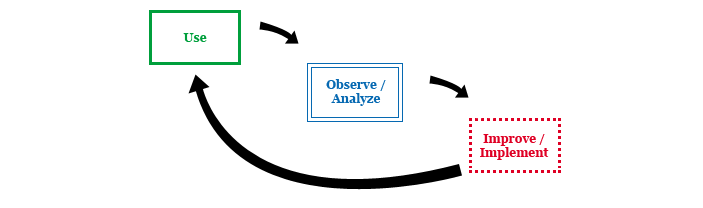
<style>
.page{position:relative;width:703px;height:208px;background:#ffffff}
.page>*{position:absolute;margin:0}
.t1{font:12px "Georgia-Bold";color:#009f3c}
.t2{font:12px "Georgia-Bold";color:#0669b2}
.t3{font:12px "Georgia-Bold";color:#df0024}
</style>
<div class="page">
<p class="t1" style="left:183px;top:33px;width:24px;height:9px">Use</p>
<p class="t2" style="left:326px;top:79px;width:60px;height:27px;text-align:center">Observe /<br>Analyze</p>
<p class="t3" style="left:480px;top:134px;width:69px;height:26px;text-align:center">Improve /<br>Implement</p>
</div>
